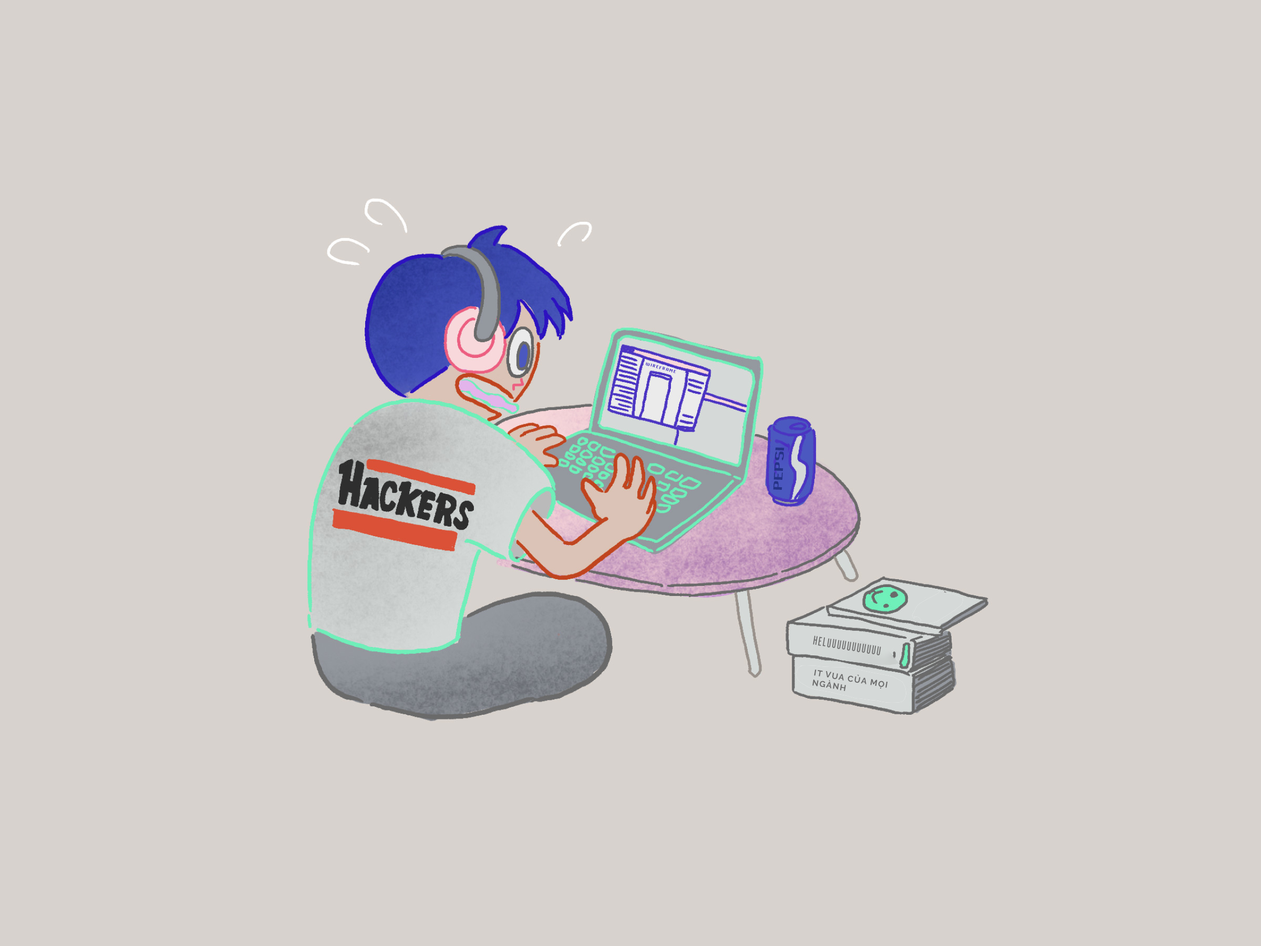
<style>
.page{position:relative;width:1261px;height:946px;background:#d7d2ce}
.page>*{position:absolute;margin:0}
.t1{font:4.2px "AirsideSans-Regular";letter-spacing:0.1em;color:#4a32c4;scale:2.13 1}
.t2{font:12.5px "AirsideSans-Regular";color:#253287;scale:2.73 1}
.t3{font:12.6px "AirsideSans-Regular";letter-spacing:0.1em;color:#6c6c6c}
.t4{font:8.4px "Raleway-Bold";letter-spacing:0.1em;color:#6c6c6c}
</style>
<div class="page">
<p class="t1" style="left:645px;top:362px;width:31px;height:11px;rotate:15deg">wireframe</p>
<p class="t2" style="left:773px;top:447px;width:11px;height:43px;rotate:-87deg">PEPSI</p>
<p class="t3" style="left:813px;top:635px;width:68px;height:20px;rotate:9deg">HELUUUUUUUUUUU</p>
<p class="t4" style="left:812px;top:669px;width:76px;height:22px;rotate:10deg">IT VUA CỦA MỌI NGÀNH</p>
</div>
